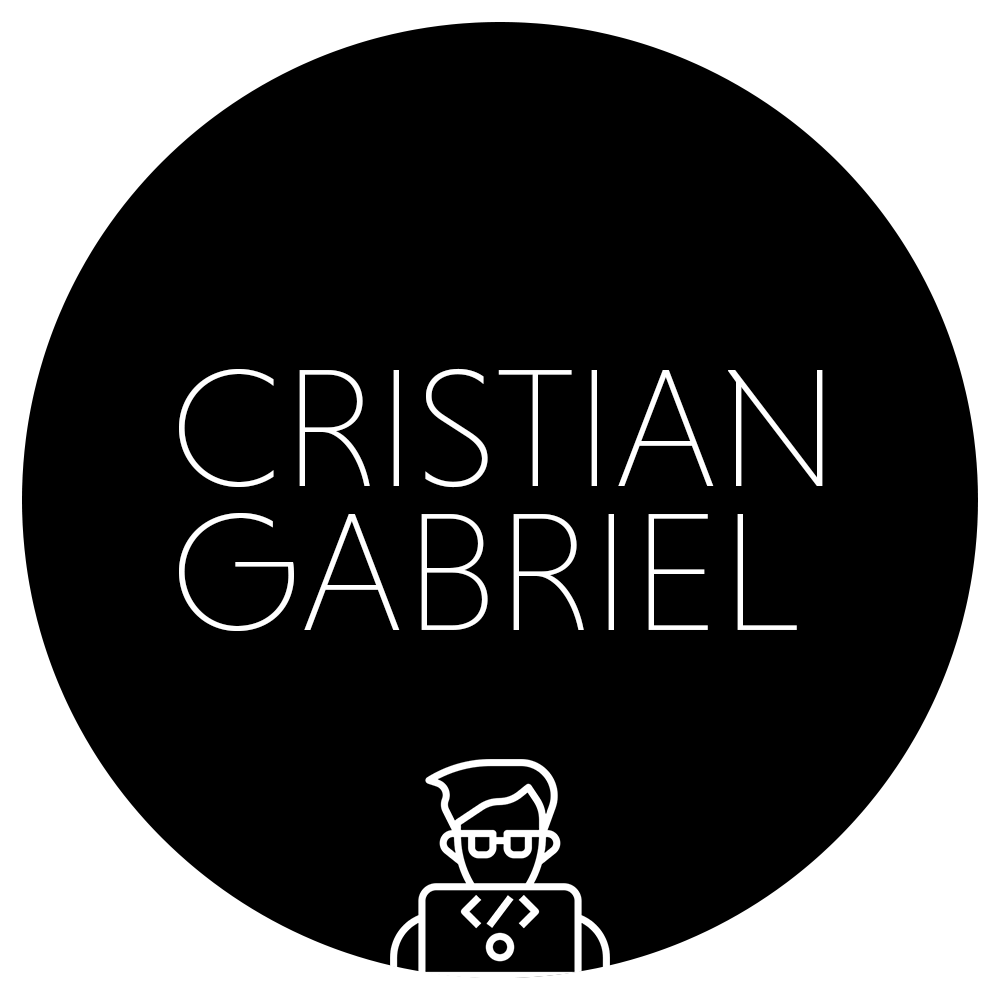
<style>
.page{position:relative;width:1000px;height:1000px;background:#000000}
.page>*{position:absolute;margin:0}
.t1{font:171px/144px "NiveauGroteskExtraLight-SmallCaps";color:#ffffff}
</style>
<div class="page">
<p class="t1" style="left:179px;top:368px;width:644px;height:263px">CRISTIAN<br>GABRIEL</p>
</div>
